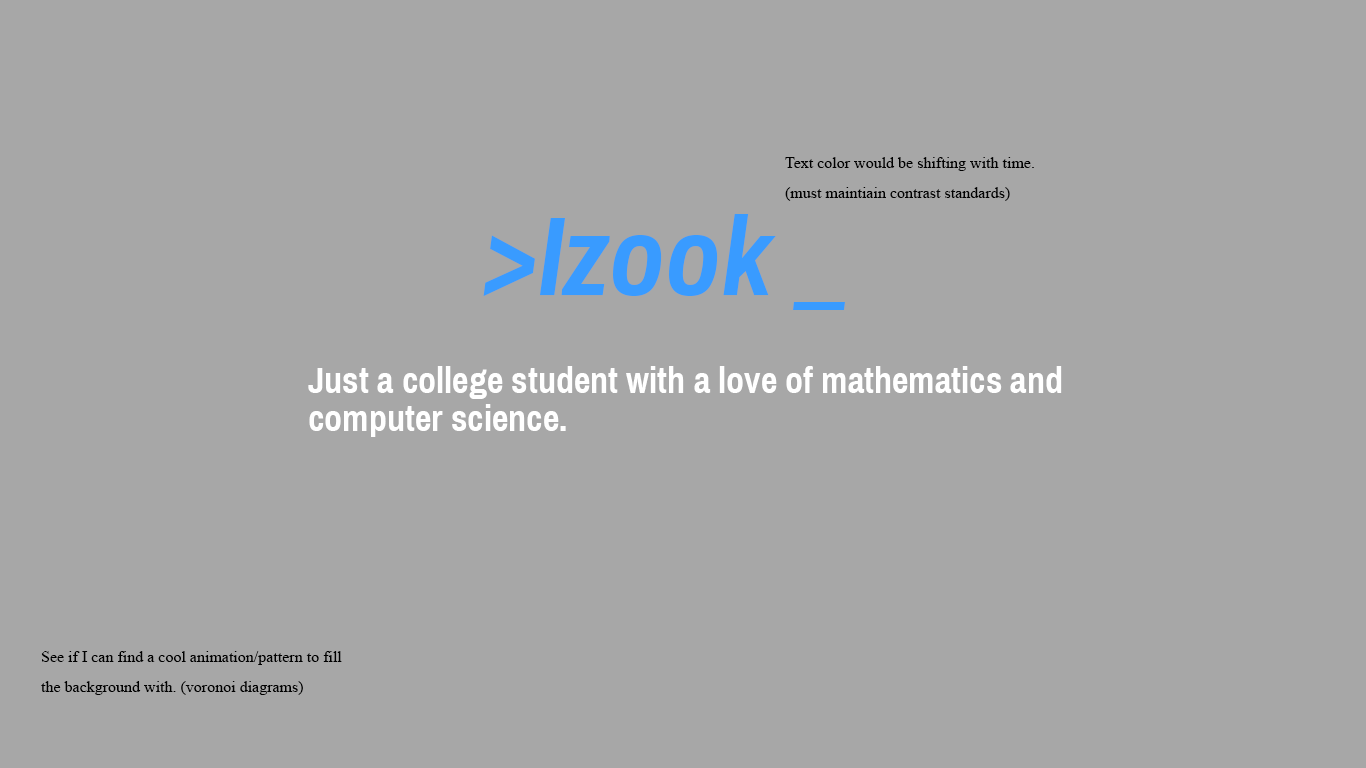
<style>
.page{position:relative;width:1366px;height:768px;background:#a7a7a7}
.page>*{position:absolute;margin:0}
.t1{font:16px/30px "TimesNewRomanPSMT";color:#010101}
.t2{font:112px "ArchivoNarrow-BoldItalic";color:#399bff}
.t3{font:36px/38px "ArchivoNarrow-Bold";color:#ffffff}
.t4{font:16px/30px "TimesNewRomanPSMT";color:#000000}
</style>
<div class="page">
<p class="t1" style="left:785px;top:157px;width:249px;height:44px">Text color would be shifting with time. (must maintiain contrast standards)</p>
<p class="t2" style="left:483px;top:214px;width:362px;height:96px">&gt;Izook _ _</p>
<p class="t3" style="left:308px;top:366px;width:754px;height:71px">Just a college student with a love of mathematics and computer science.</p>
<p class="t4" style="left:41px;top:651px;width:301px;height:44px">See if I can find a cool animation/pattern to fill the background with. (voronoi diagrams)</p>
</div>
